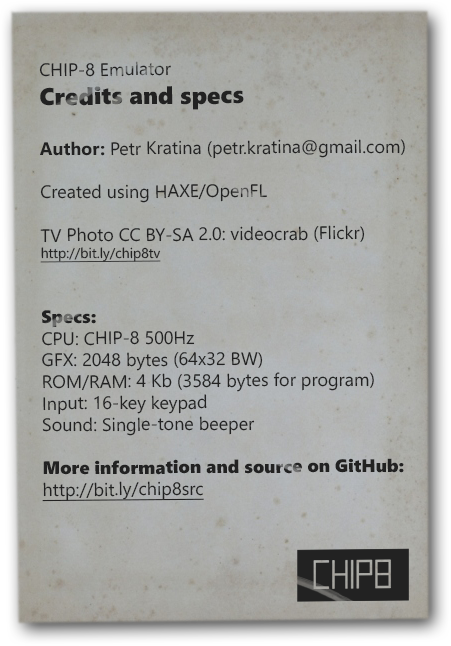
<style>
.page{position:relative;width:451px;height:646px}
.page>*{position:absolute;margin:0}
.t1{font:18px "SegoeUI";color:#222222}
.t2{font:24px "SegoeUIBlack";color:#222222}
.t3{font:18px "SegoeUI-Bold";color:#222222}
.t4{font:14px "SegoeUI";color:#222222;text-decoration:underline}
.t5{font:18px "SegoeUIBlack";color:#222222}
.t6{font:18px "SegoeUI";color:#222222;text-decoration:underline}
</style>
<div class="page">
<p class="t1" style="left:39px;top:61px;width:366px;height:441px">CHIP-8 Emulator<br><span class="t2">Credits and specs<br><br></span><span class="t3">Author:</span> Petr Kratina (petr.kratina@gmail.com)<br><br>Created using HAXE/OpenFL<br><br>TV Photo CC BY-SA 2.0: videocrab (Flickr)<br><span class="t4">http://bit.ly/chip8tv<br><br><br></span><span class="t5">Specs:<br></span>CPU: CHIP-8 500Hz<br>GFX: 2048 bytes (64x32 BW)<br>ROM/RAM: 4 Kb (3584 bytes for program)<br>Input: 16-key keypad<br>Sound: Single-tone beeper<br><br><span class="t5">More information and source on GitHub:<br></span><span class="t6">http://bit.ly/chip8src</span></p>
</div>
